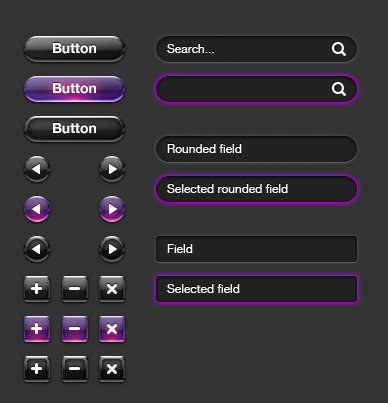
<style>
.page{position:relative;width:388px;height:403px;background:#333333}
.page>*{position:absolute;margin:0}
.t1{font:14px "HelveticaNeue-Bold";color:#ffffff}
.t2{font:12px "HelveticaNeue";color:#ffffff}
</style>
<div class="page">
<p class="t1" style="left:53px;top:43px;width:43px;height:11px">Button</p>
<p class="t2" style="left:167px;top:44px;width:47px;height:9px">Search...</p>
<p class="t1" style="left:53px;top:83px;width:43px;height:11px">Button</p>
<p class="t1" style="left:53px;top:123px;width:43px;height:11px">Button</p>
<p class="t2" style="left:167px;top:144px;width:75px;height:9px">Rounded field</p>
<p class="t2" style="left:167px;top:184px;width:121px;height:9px">Selected rounded field</p>
<p class="t2" style="left:167px;top:244px;width:26px;height:9px">Field</p>
<p class="t2" style="left:167px;top:284px;width:73px;height:9px">Selected field</p>
</div>
